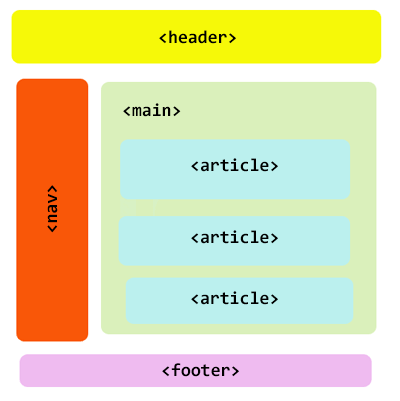
<style>
.page{position:relative;width:400px;height:401px;background:#ffffff}
.page>*{position:absolute;margin:0}
.t1{font:18px "Consolas-Bold";color:#000000}
</style>
<div class="page">
<p class="t1" style="left:159px;top:30px;width:77px;height:14px">&lt;header&gt;</p>
<p class="t1" style="left:123px;top:103px;width:58px;height:14px">&lt;main&gt;</p>
<p class="t1" style="left:191px;top:158px;width:87px;height:14px">&lt;article&gt;</p>
<p class="t1" style="left:47px;top:185px;width:11px;height:48px;rotate:-90deg">&lt;nav&gt;</p>
<p class="t1" style="left:191px;top:230px;width:87px;height:14px">&lt;article&gt;</p>
<p class="t1" style="left:191px;top:291px;width:87px;height:14px">&lt;article&gt;</p>
<p class="t1" style="left:162px;top:363px;width:77px;height:14px">&lt;footer&gt;</p>
</div>
